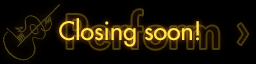
<style>
.page{position:relative;width:256px;height:64px;background:#000000}
.page>*{position:absolute;margin:0}
.t1{font:46.3px "FuturaStd-Heavy"}
.t2{font:25px "FuturaStd-Medium";color:#ffe64d}
</style>
<div class="page">
<p class="t1" style="left:66px;top:9px;width:183px;height:41px">Perform ›</p>
<p class="t2" style="left:59px;top:18px;width:140px;height:29px">Closing soon!</p>
</div>
